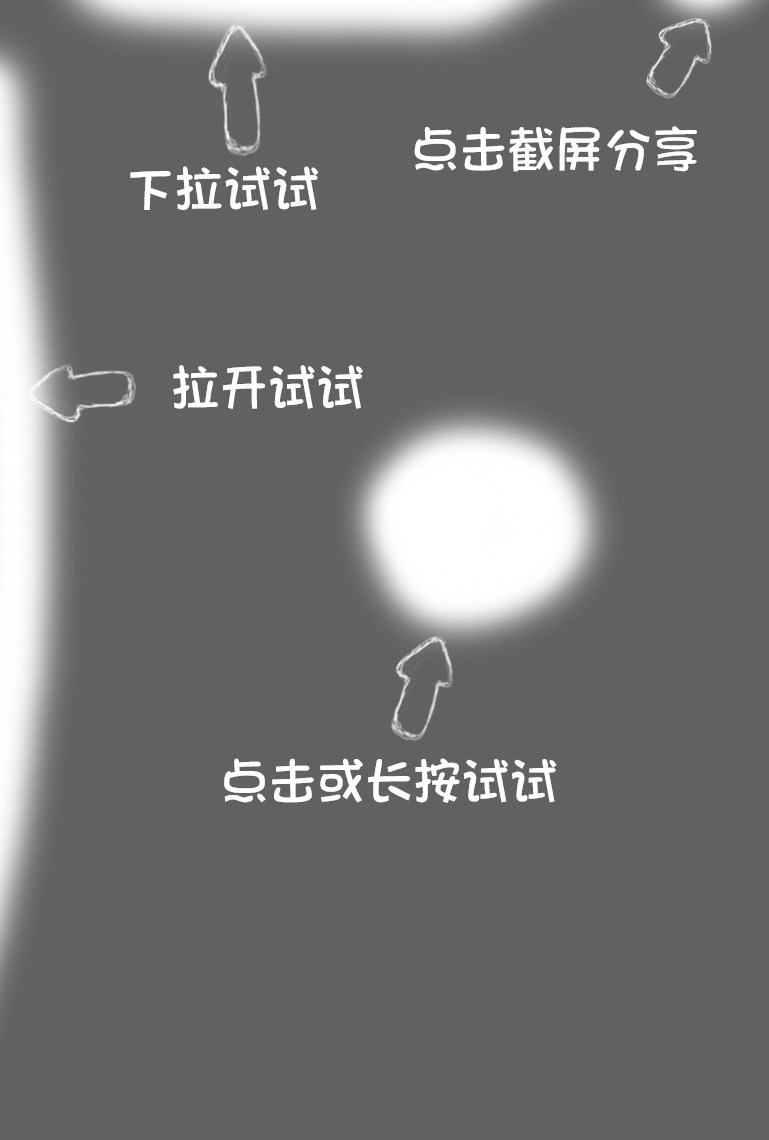
<style>
.page{position:relative;width:769px;height:1140px;background:#616161}
.page>*{position:absolute;margin:0}
.t1{font:47px "STHeitiSC-Light";color:#ffffff}
</style>
<div class="page">
<p class="t1" style="left:414px;top:126px;width:283px;height:46px">点击截屏分享</p>
<p class="t1" style="left:130px;top:166px;width:189px;height:44px">下拉试试</p>
<p class="t1" style="left:173px;top:365px;width:190px;height:44px">拉开试试</p>
<p class="t1" style="left:224px;top:758px;width:333px;height:45px">点击或长按试试</p>
</div>
